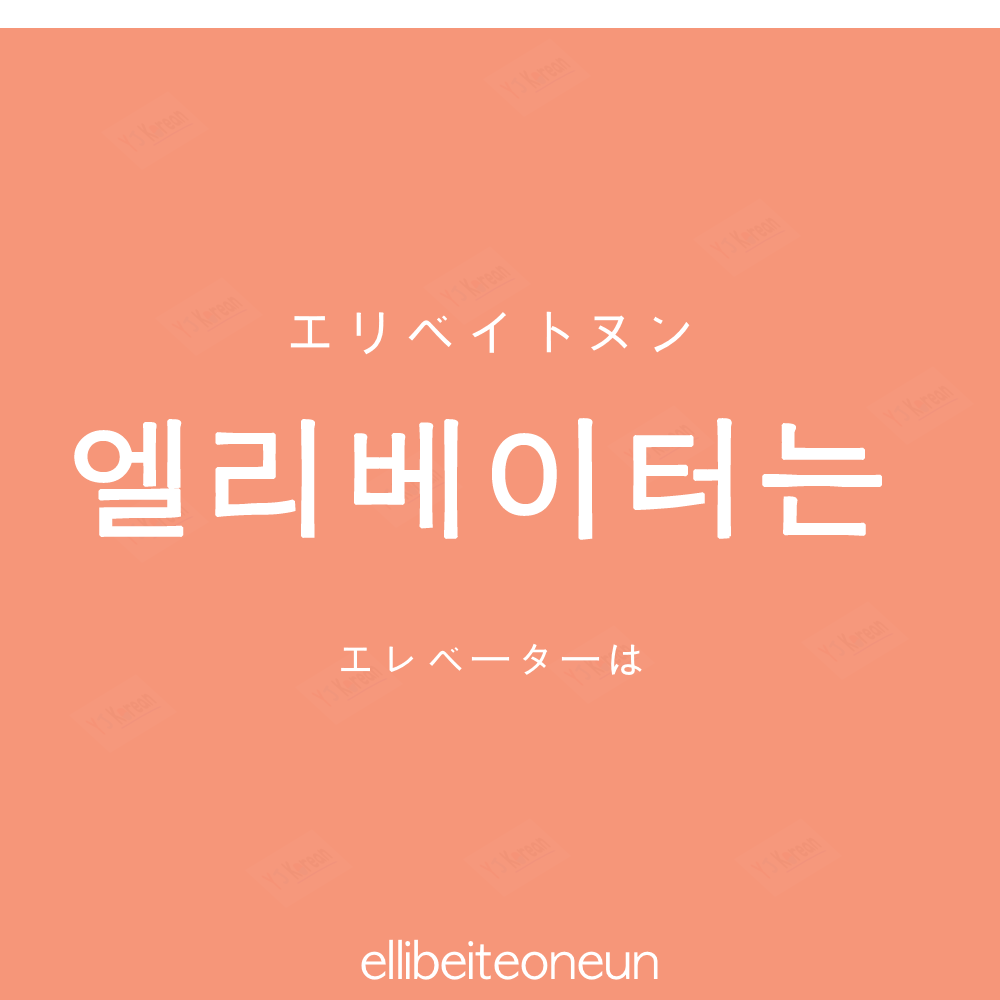
<style>
.page{position:relative;width:1000px;height:1000px;background:#f69679}
.page>*{position:absolute;margin:0}
.t1{font:60px "AppleGothic";color:#ffffff}
.t2{font:130px "AppleGothic";letter-spacing:0.04em;color:#ffffff;font-weight:bold}
.t3{font:45px "AppleGothic";color:#ffffff}
.t4{font:45px "HiraKakuProN-W3";color:#ffffff}
.t5{font:50px "AppleGothic";color:#ffffff}
</style>
<div class="page">
<p class="t1" style="left:290px;top:311px;width:400px;height:44px">エリベイトヌン</p>
<p class="t2" style="left:74px;top:418px;width:808px;height:122px">엘리베이터는</p>
<p class="t3" style="left:341px;top:643px;width:301px;height:32px">エレベ<span class="t4">ー</span>タ<span class="t4">ー</span>は</p>
<p class="t5" style="left:361px;top:939px;width:297px;height:41px">ellibeiteoneun</p>
</div>
